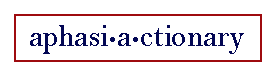
<style>
.page{position:relative;width:275px;height:75px;background:#ffffff}
.page>*{position:absolute;margin:0}
.t1{font:31.7px "BellMT";color:#030754}
.t2{font:34px "BellMTBold";color:#030754}
</style>
<div class="page">
<p class="t1" style="left:30px;top:25px;width:214px;height:29px">aphasi<span class="t2">∙</span>a<span class="t2">∙</span>ctionary</p>
</div>
